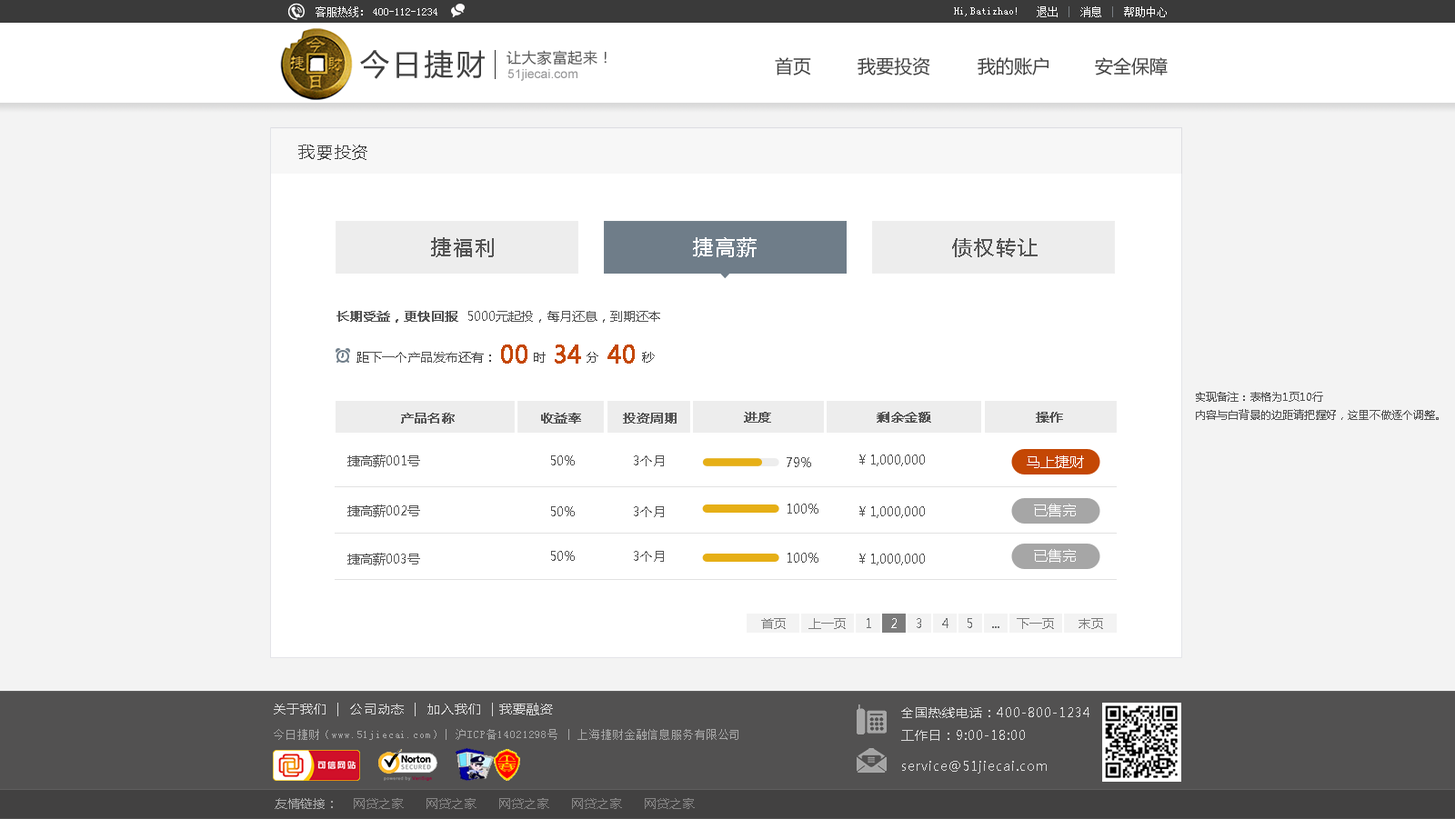
<style>
.page{position:relative;width:1455px;height:819px;background:#ffffff}
.page>*{position:absolute;margin:0}
.t1{font:10.9px "SimSun";color:#ffffff}
.t2{font:29.1px "MicrosoftYaHei";letter-spacing:0.1em;color:#3f3f3f}
.t3{font:14.6px "MicrosoftYaHei";letter-spacing:0.05em;color:#575757}
.t4{font:18.2px "MicrosoftYaHei";color:#414141}
.t5{font:12.7px "ArialMT";color:#969697}
.t6{font:16.4px "MicrosoftYaHei";letter-spacing:0.1em;color:#3f3f3f}
.t7{font:20px "MicrosoftYaHei";letter-spacing:0.1em;color:#545454}
.t8{font:20px "MicrosoftYaHei";letter-spacing:0.1em;color:#ffffff}
.t9{font:12.7px "MicrosoftYaHei";color:#545454;font-weight:bold}
.t10{font:12.7px "MicrosoftYaHei";color:#545454}
.t11{font:12.7px "MicrosoftYaHei";color:#414141}
.t12{font:23.6px "MicrosoftYaHei";color:#c44704;font-weight:bold}
.t13{font:10.9px/18.2px "MicrosoftYaHei";color:#545454}
.t14{font:14.6px "MicrosoftYaHei";color:#ffffff}
.t15{font:12.7px "MicrosoftYaHei";letter-spacing:0.07em;color:#dbdbdb}
.t16{font:12.7px "MicrosoftYaHei";letter-spacing:0.07em;color:#dadada}
.t17{font:10.9px "SimSun";letter-spacing:0.07em;color:#a7a7a7}
.t18{font:12.7px "MicrosoftYaHei";color:#858484}
.t19{font:12.7px "MicrosoftYaHei";color:#a7a7a7}
</style>
<div class="page">
<p class="t1" style="left:316px;top:6px;width:47px;height:11px">客服热线：</p>
<p class="t1" style="left:373px;top:8px;width:64px;height:7px">400-112-1234</p>
<p class="t1" style="left:954px;top:7px;width:63px;height:9px">Hi,Batizhao!</p>
<p class="t1" style="left:1037px;top:6px;width:130px;height:11px">退出    消息    帮助中心</p>
<p class="t2" style="left:360px;top:50px;width:125px;height:29px">今日捷财</p>
<p class="t3" style="left:507px;top:50px;width:100px;height:15px">让大家富起来！</p>
<p class="t4" style="left:775px;top:57px;width:36px;height:18px">首页</p>
<p class="t4" style="left:858px;top:57px;width:72px;height:18px">我要投资</p>
<p class="t4" style="left:978px;top:57px;width:71px;height:18px">我的账户</p>
<p class="t4" style="left:1095px;top:57px;width:73px;height:18px">安全保障</p>
<p class="t5" style="left:507px;top:69px;width:71px;height:12px">51jiecai.com</p>
<p class="t6" style="left:298px;top:145px;width:69px;height:15px">我要投资</p>
<p class="t7" style="left:431px;top:237px;width:63px;height:20px">捷福利</p>
<p class="t8" style="left:693px;top:237px;width:64px;height:20px">捷高薪</p>
<p class="t7" style="left:952px;top:238px;width:86px;height:19px">债权转让</p>
<p class="t9" style="left:337px;top:311px;width:121px;height:12px">长期受益，更快回报</p>
<p class="t10" style="left:468px;top:311px;width:192px;height:12px">5000元起投，每月还息，到期还本</p>
<p class="t10" style="left:357px;top:352px;width:134px;height:11px"><span class="t11">距</span>下一个产品发布<span class="t11">还有：</span></p>
<p class="t12" style="left:501px;top:345px;width:27px;height:19px">00</p>
<p class="t11" style="left:534px;top:352px;width:12px;height:11px">时</p>
<p class="t12" style="left:555px;top:345px;width:26px;height:19px">34</p>
<p class="t11" style="left:587px;top:352px;width:11px;height:11px">分</p>
<p class="t12" style="left:608px;top:345px;width:27px;height:19px">40</p>
<p class="t11" style="left:642px;top:352px;width:13px;height:11px">秒</p>
<p class="t13" style="left:1196px;top:392px;width:243px;height:28px">实现备注：表格为1页10行<br>内容与白背景的边距请把握好，这里不做逐个调整。</p>
<p class="t9" style="left:401px;top:413px;width:54px;height:11px">产品名称</p>
<p class="t9" style="left:541px;top:413px;width:40px;height:11px">收益率</p>
<p class="t9" style="left:623px;top:413px;width:54px;height:11px">投资周期</p>
<p class="t9" style="left:744px;top:412px;width:27px;height:11px">进度</p>
<p class="t9" style="left:877px;top:412px;width:54px;height:11px">剩余金额</p>
<p class="t9" style="left:1036px;top:412px;width:27px;height:11px">操作</p>
<p class="t10" style="left:347px;top:455px;width:73px;height:12px">捷高薪001号</p>
<p class="t10" style="left:551px;top:456px;width:24px;height:10px">50%</p>
<p class="t10" style="left:634px;top:456px;width:30px;height:11px">3个月</p>
<p class="t10" style="left:787px;top:457px;width:24px;height:10px">79%</p>
<p class="t10" style="left:859px;top:455px;width:66px;height:12px">￥1,000,000</p>
<p class="t14" style="left:1027px;top:456px;width:57px;height:12px">马上捷财</p>
<p class="t10" style="left:347px;top:505px;width:73px;height:12px">捷高薪002号</p>
<p class="t10" style="left:551px;top:507px;width:24px;height:10px">50%</p>
<p class="t10" style="left:634px;top:507px;width:30px;height:10px">3个月</p>
<p class="t10" style="left:788px;top:504px;width:31px;height:10px">100%</p>
<p class="t10" style="left:859px;top:507px;width:66px;height:11px">￥1,000,000</p>
<p class="t14" style="left:1034px;top:504px;width:42px;height:13px">已售完</p>
<p class="t10" style="left:347px;top:553px;width:73px;height:13px">捷高薪003号</p>
<p class="t10" style="left:551px;top:551px;width:24px;height:10px">50%</p>
<p class="t10" style="left:634px;top:551px;width:30px;height:11px">3个月</p>
<p class="t10" style="left:788px;top:553px;width:31px;height:10px">100%</p>
<p class="t10" style="left:859px;top:554px;width:66px;height:12px">￥1,000,000</p>
<p class="t14" style="left:1034px;top:549px;width:42px;height:14px">已售完</p>
<p class="t15" style="left:274px;top:703px;width:279px;height:14px">关于我们  |  公司动态  |  加入我们  | 我要融资</p>
<p class="t16" style="left:901px;top:708px;width:189px;height:33px">全国热线电话：400-800-1234<br>工作日：9:00-18:00</p>
<p class="t17" style="left:274px;top:729px;width:465px;height:11px">今日捷财（www.51jiecai.com）| 沪ICP备14021298号 | 上海捷财金融信息服务有限公司</p>
<p class="t16" style="left:902px;top:761px;width:145px;height:13px">service@51jiecai.com</p>
<p class="t18" style="left:275px;top:799px;width:420px;height:10px"><span class="t19">友情链接：</span>    网贷之家      网贷之家      网贷之家      网贷之家      网贷之家</p>
</div>
